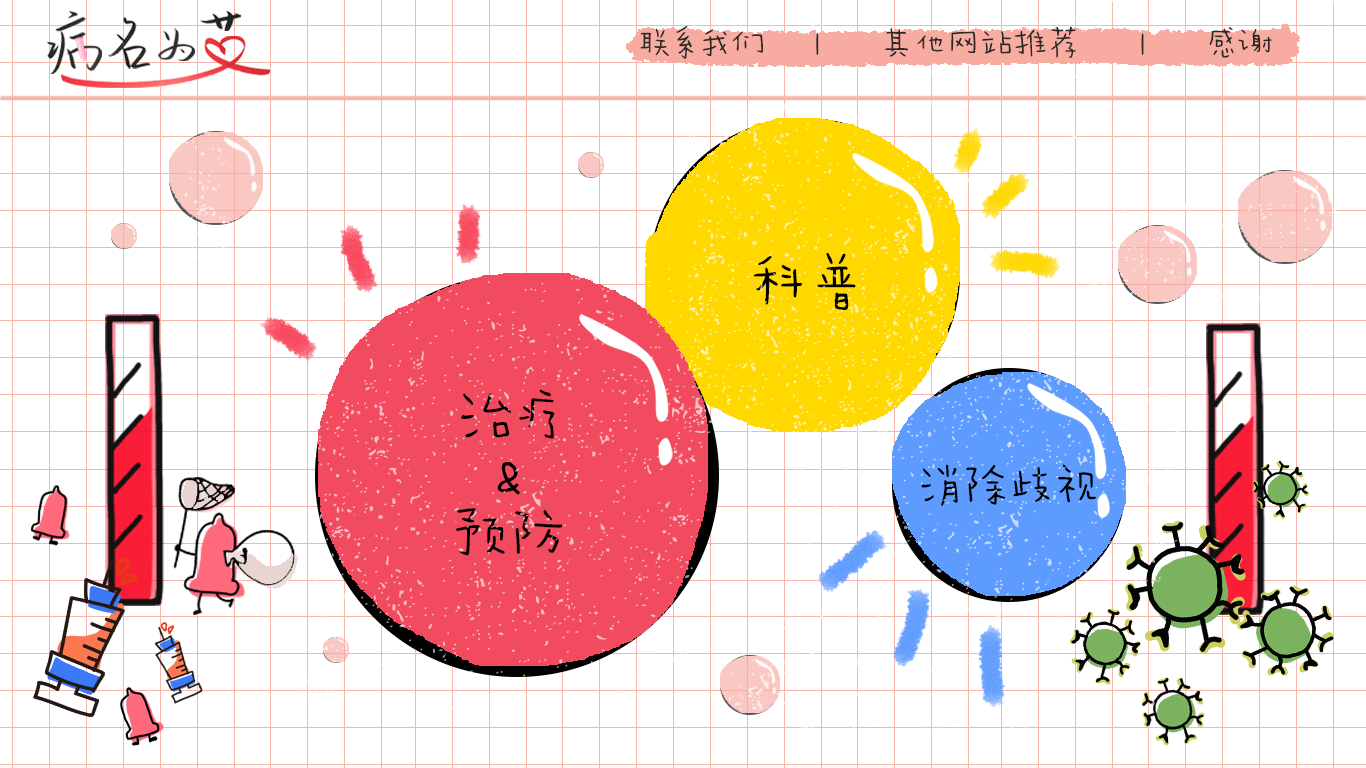
<style>
.page{position:relative;width:1366px;height:768px;background:#ffffff}
.page>*{position:absolute;margin:0}
.t1{font:33.3px "AaWanWan";color:#282a26}
.t2{font:58.3px "AaWanWan";color:#000000}
.t3{font:58.3px/58.3px "AaWanWan";color:#000000}
.t4{font:45.8px "AaWanWan";color:#000000}
</style>
<div class="page">
<p class="t1" style="left:640px;top:25px;width:632px;height:34px">联系我们     |      其他网站推荐      |      感谢</p>
<p class="t2" style="left:754px;top:252px;width:102px;height:58px">科普</p>
<p class="t3" style="left:456px;top:389px;width:106px;height:167px;text-align:center">治疗<br>&amp;<br>预防</p>
<p class="t4" style="left:921px;top:464px;width:175px;height:42px">消除歧视</p>
</div>
